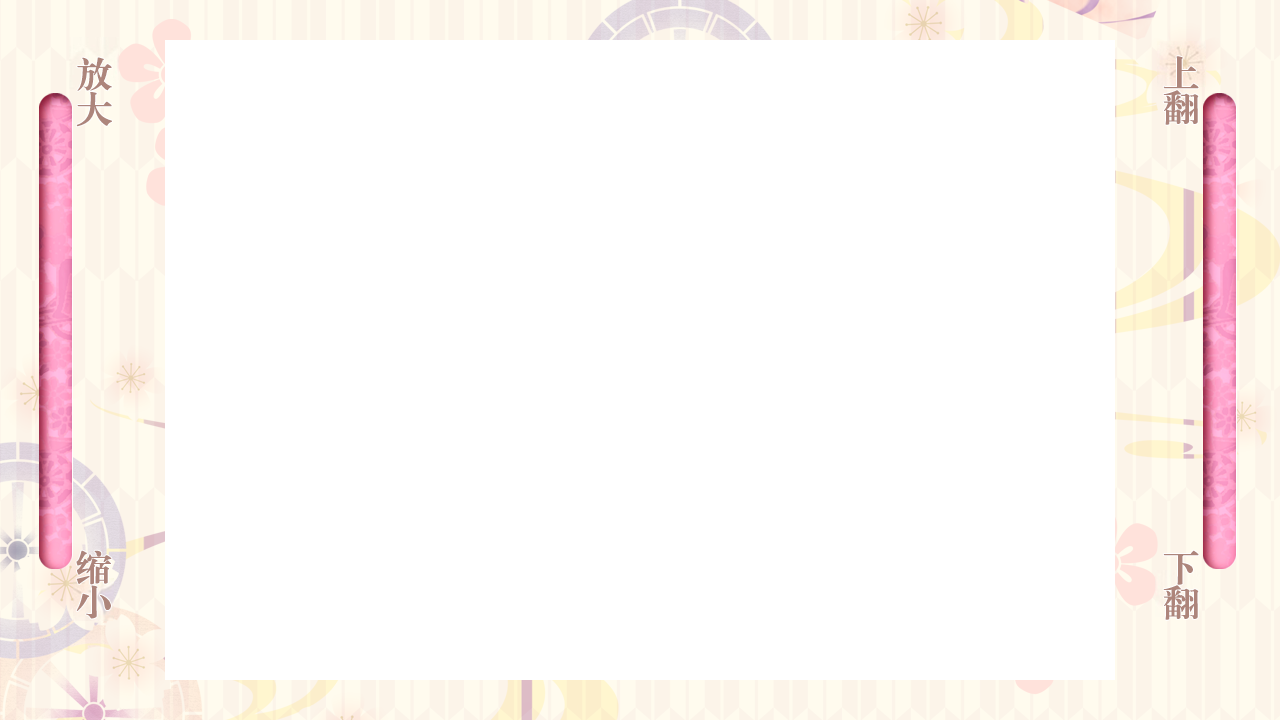
<style>
.page{position:relative;width:1280px;height:720px;background:#ffffff}
.page>*{position:absolute;margin:0}
.t1{font:36px/7.1px "FZXBSK--GBK1-0";letter-spacing:-0.03em;color:#ad857b;font-weight:bold}
</style>
<div class="page">
<p class="t1" style="left:76px;top:57px;width:36px;height:70px;text-align:center">放大</p>
<p class="t1" style="left:1163px;top:56px;width:36px;height:69px;text-align:center">上翻</p>
<p class="t1" style="left:76px;top:550px;width:36px;height:69px;text-align:center">缩小</p>
<p class="t1" style="left:1163px;top:550px;width:36px;height:70px;text-align:center">下翻</p>
</div>
